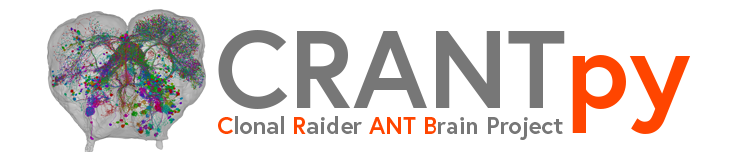
<style>
.page{position:relative;width:738px;height:152px;background:#ffffff}
.page>*{position:absolute;margin:0}
.t1{font:110px "Europa-Bold";color:#777777}
.t2{font:110px "Europa-Bold";color:#ff4500}
.t3{font:24px "Europa-Bold";color:#777777}
.t4{font:24px "Europa-Bold";color:#ff4500}
</style>
<div class="page">
<p class="t1" style="left:218px;top:30px;width:473px;height:104px">CRANT<span class="t2">py</span></p>
<p class="t3" style="left:218px;top:116px;width:345px;height:24px"><span class="t4">C</span>lonal <span class="t4">R</span>aider <span class="t4">ANT B</span>rain Project</p>
</div>
